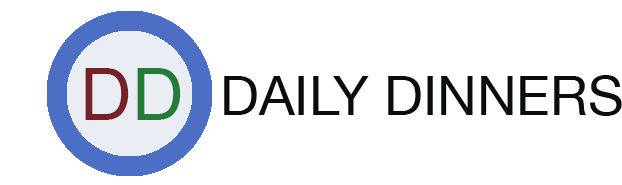
<style>
.page{position:relative;width:622px;height:185px;background:#ffffff}
.page>*{position:absolute;margin:0}
.t1{font:72px "ArialMT";color:#752127}
.t2{font:72px "ArialMT";color:#257c38}
.t3{font:55px "HelveticaNeue";color:#0a0e0b}
</style>
<div class="page">
<p class="t1" style="left:85px;top:68px;width:96px;height:52px">D<span class="t2">D</span></p>
<p class="t3" style="left:224px;top:75px;width:398px;height:41px">DAILY DINNERS</p>
</div>
